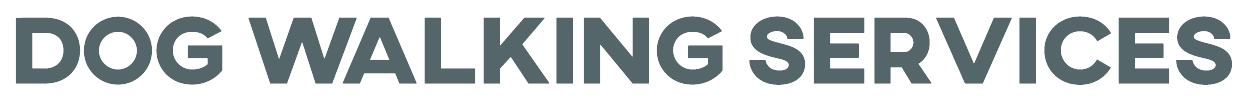
<style>
.page{position:relative;width:1248px;height:100px;background:#ffffff}
.page>*{position:absolute;margin:0}
.t1{font:96px "AXIS-ExtraBold";letter-spacing:-0.05em;color:#546669;font-weight:bold}
</style>
<div class="page">
<p class="t1" style="left:15px;top:16px;width:1218px;height:69px">Dog walking Services</p>
</div>
